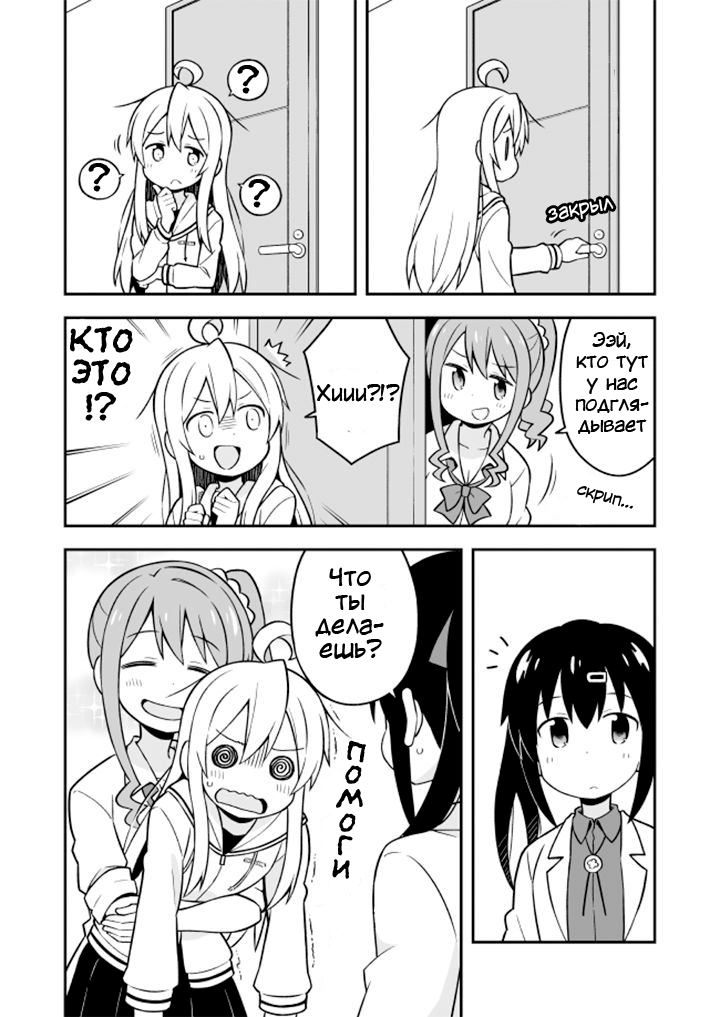
<style>
.page{position:relative;width:720px;height:1017px;background:#ffffff}
.page>*{position:absolute;margin:0}
.t1{font:40px "el_CCEvilSchemes";color:#000000}
.t2{font:18.7px "KuraiVoice2";color:#ffffff}
.t3{font:40px/33.3px "el_CCEvilSchemes";color:#000000}
.t4{font:18.7px/21.3px "KuraiVoice2";color:#000000}
.t5{font:21.3px "KuraiVoice2";color:#000000}
.t6{font:16px "KuraiVoice2";color:#000000}
.t7{font:24px/24px "KuraiVoice2";color:#000000}
.t8{font:32px/24px "el_CCEvilSchemes";color:#000000}
</style>
<div class="page">
<p class="t1" style="left:237px;top:65px;width:22px;height:29px">?</p>
<p class="t1" style="left:88px;top:163px;width:22px;height:29px">?</p>
<p class="t1" style="left:248px;top:179px;width:22px;height:29px">?</p>
<p class="t2" style="left:548px;top:198px;width:66px;height:23px;rotate:-10deg">закрыл</p>
<p class="t3" style="left:70px;top:325px;width:63px;height:96px;text-align:center">кто<br>это<br>!?</p>
<p class="t4" style="left:575px;top:332px;width:74px;height:102px;text-align:center">Ээй,<br>кто тут<br>у нас<br>подгля-<br>дывает</p>
<p class="t5" style="left:317px;top:384px;width:83px;height:18px">Хиии?!?</p>
<p class="t6" style="left:577px;top:486px;width:56px;height:23px;rotate:15deg">скрип...</p>
<p class="t7" style="left:315px;top:567px;width:69px;height:92px;text-align:center">Что<br>ты<br>дела-<br>ешь?</p>
<p class="t8" style="left:332px;top:740px;width:34px;height:139px;text-align:center;rotate:7deg">п<br>о<br>м<br>о<br>г<br>и</p>
</div>
